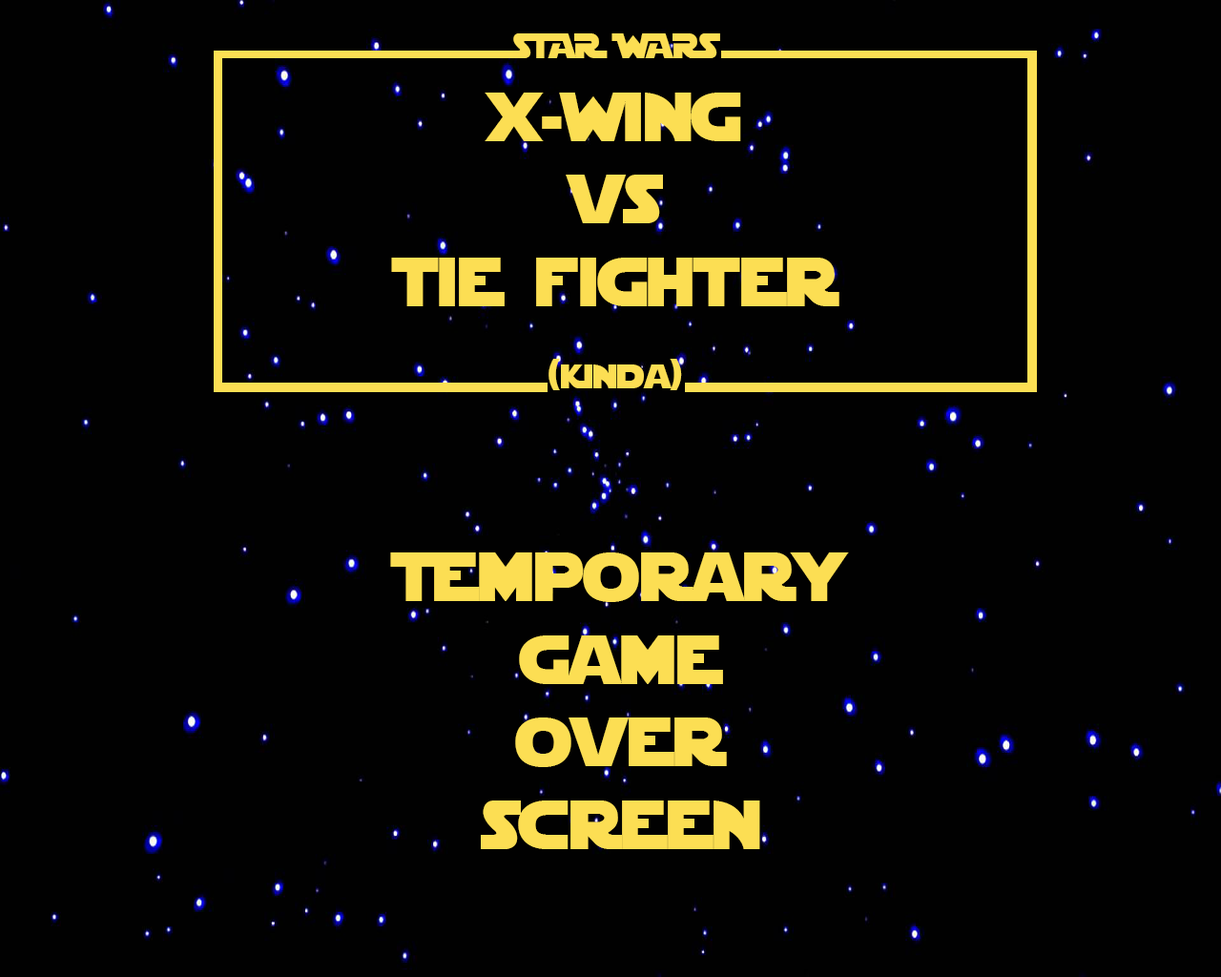
<style>
.page{position:relative;width:1221px;height:977px;background:#010101}
.page>*{position:absolute;margin:0}
.t1{font:68.7px "StarJediSpecialEdition";color:#fcde53}
.t2{font:34.3px "StarJediSpecialEdition";color:#fcde53}
</style>
<div class="page">
<p class="t1" style="left:391px;top:33px;width:448px;height:357px;text-align:center"><span class="t2">STAR WARS<br></span>x-wing <br>vs <br>tie fighter<span class="t2"><br><br>(kinda)</span></p>
<p class="t1" style="left:390px;top:552px;width:459px;height:297px;text-align:center">Temporary <br>game <br>over<br>screen</p>
</div>
